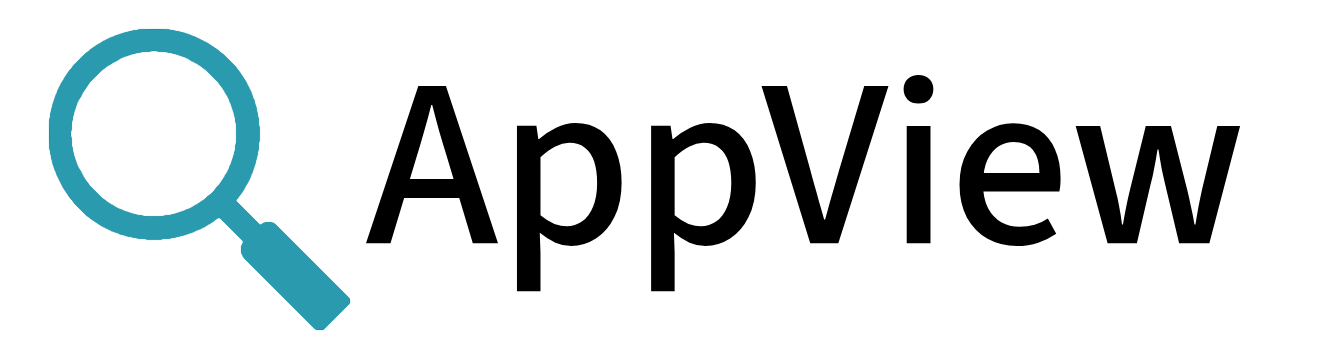
<style>
.page{position:relative;width:1320px;height:360px;background:#ffffff}
.page>*{position:absolute;margin:0}
.t1{font:240px "SourceSans3-Medium";color:#000000}
</style>
<div class="page">
<p class="t1" style="left:366px;top:74px;width:875px;height:218px">AppView</p>
</div>
